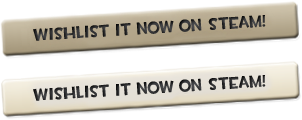
<style>
.page{position:relative;width:302px;height:120px;background:#ffffff}
.page>*{position:absolute;margin:0}
.t1{font:17px "TF2Build";letter-spacing:0.01em;color:#2e2f30;scale:0.95 1}
</style>
<div class="page">
<p class="t1" style="left:33px;top:15px;width:233px;height:26px;rotate:-4deg">Wishlist it now on Steam!</p>
<p class="t1" style="left:33px;top:75px;width:233px;height:26px;rotate:-4deg">Wishlist it now on Steam!</p>
</div>
